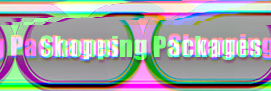
<style>
.page{position:relative;width:271px;height:91px}
.page>*{position:absolute;margin:0}
.t1{font:26.5px "Impact";letter-spacing:0.02em}
</style>
<div class="page">
<p class="t1" style="left:25px;top:33px;width:222px;height:25px">Shopping Packages</p>
</div>
